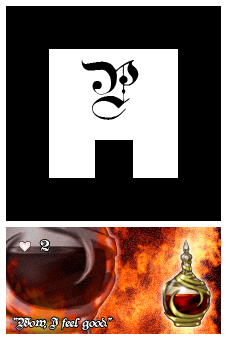
<style>
.page{position:relative;width:227px;height:340px;background:#000000}
.page>*{position:absolute;margin:0}
.t1{font:60px "TeutonicNo1-DemiBold";color:#000000}
.t2{font:16px "TeutonicNo4-DemiBold";color:#fefefe}
.t3{font:12px "TeutonicNo2-DemiBold";color:#ffffff;font-style:italic}
</style>
<div class="page">
<p class="t1" style="left:81px;top:60px;width:58px;height:60px">P</p>
<p class="t2" style="left:40px;top:240px;width:10px;height:11px">2</p>
<p class="t3" style="left:13px;top:317px;width:99px;height:13px">“Wow, I feel good.”</p>
</div>
